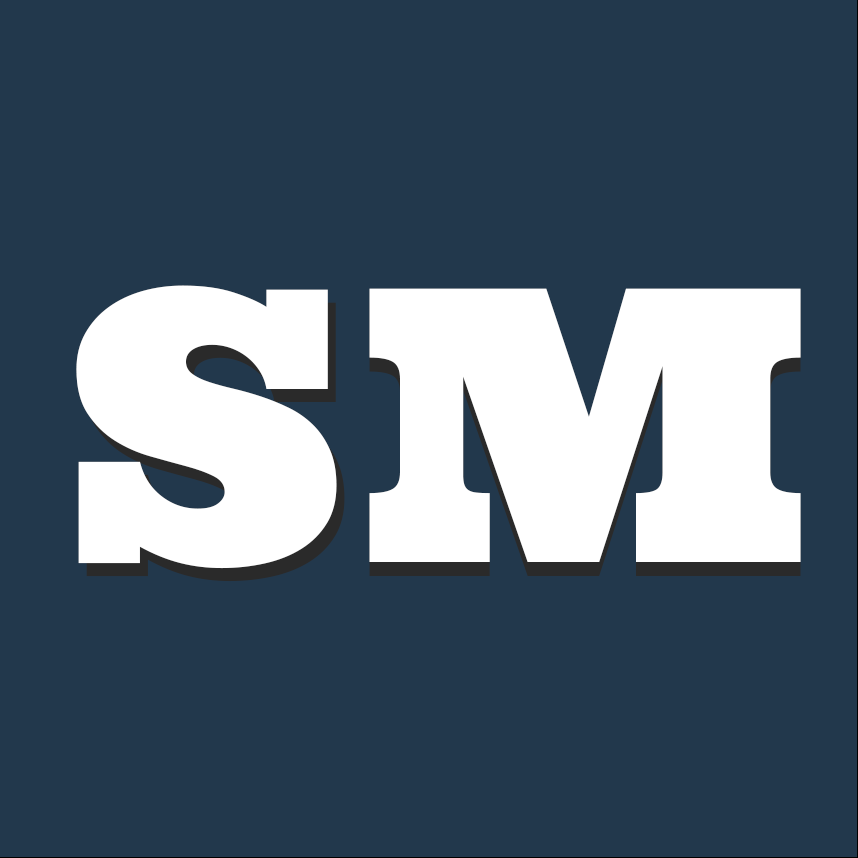
<style>
.page{position:relative;width:858px;height:858px;background:#22384c}
.page>*{position:absolute;margin:0}
.t1{font:380px "Ultra";color:#ffffff}
</style>
<div class="page">
<p class="t1" style="left:76px;top:285px;width:261px;height:284px">S</p>
<p class="t1" style="left:369px;top:288px;width:432px;height:274px">M</p>
<p class="t1" style="left:84px;top:298px;width:261px;height:284px">S</p>
<p class="t1" style="left:369px;top:302px;width:432px;height:274px">M</p>
</div>
